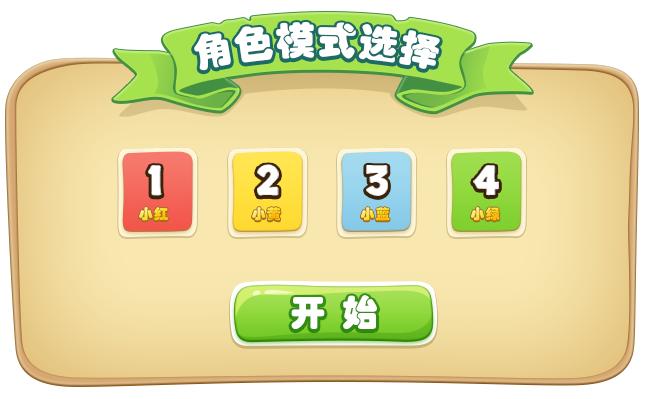
<style>
.page{position:relative;width:650px;height:399px}
.page>*{position:absolute;margin:0}
.t1{font:38px "STHupo";letter-spacing:0.05em;color:#ffffff}
.t2{font:41px "Skranji-Bold";letter-spacing:0.02em;color:#ffffff}
.t3{font:14px "STHupo";letter-spacing:0.1em}
.t4{font:36px "STHupo";letter-spacing:0.1em;color:#ffffff}
</style>
<div class="page">
<p class="t1" style="left:194px;top:21px;width:246px;height:50px">角色模式选择</p>
<p class="t2" style="left:148px;top:165px;width:14px;height:31px">1</p>
<p class="t2" style="left:257px;top:164px;width:22px;height:32px">2</p>
<p class="t2" style="left:366px;top:165px;width:22px;height:31px">3</p>
<p class="t2" style="left:473px;top:165px;width:26px;height:31px">4</p>
<p class="t3" style="left:139px;top:207px;width:29px;height:14px">小红</p>
<p class="t3" style="left:252px;top:207px;width:29px;height:14px">小黄</p>
<p class="t3" style="left:361px;top:207px;width:29px;height:14px">小蓝</p>
<p class="t3" style="left:471px;top:207px;width:29px;height:14px">小绿</p>
<p class="t4" style="left:291px;top:295px;width:86px;height:34px">开 始</p>
</div>
